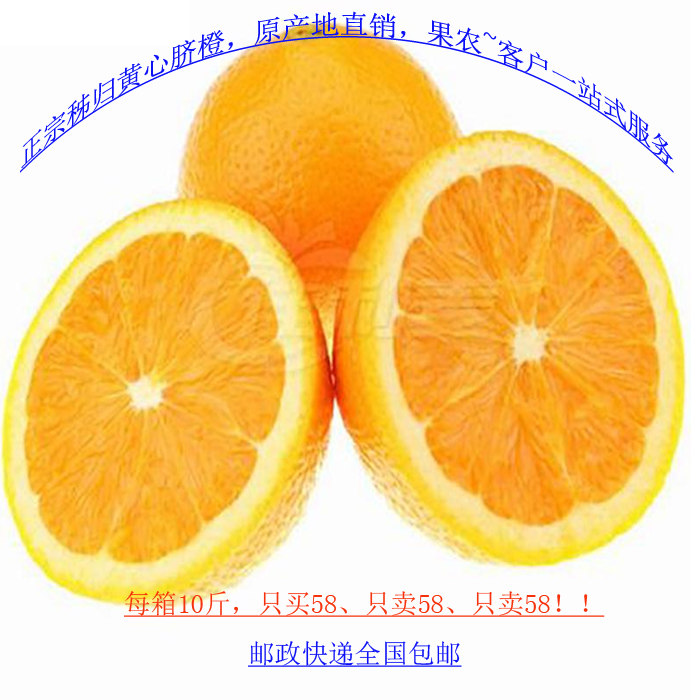
<style>
.page{position:relative;width:700px;height:700px;background:#fdfdfd}
.page>*{position:absolute;margin:0}
.t1{font:26.7px "SimSun";color:#0c11f6;text-decoration:underline}
.t2{font:26.7px "SimSun";color:#f6320c;text-decoration:underline}
</style>
<div class="page">
<p class="t1" style="left:20px;top:11px;width:654px;height:162px">正宗秭归黄心脐橙，原产地直销，果农~客户一站式服务</p>
<p class="t2" style="left:124px;top:591px;width:481px;height:26px">每箱10斤，只买58、只卖58、只卖58！！</p>
<p class="t1" style="left:248px;top:641px;width:214px;height:26px">邮政快递全国包邮</p>
</div>
